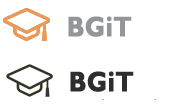
<style>
.page{position:relative;width:170px;height:110px;background:#ffffff}
.page>*{position:absolute;margin:0}
.t1{font:28.1px "GillSansMT-Bold";color:#939598;font-weight:bold;scale:0.89 1}
.t2{font:28.1px "GillSansMT-Bold";color:#2e2e2c;font-weight:bold;scale:0.89 1}
</style>
<div class="page">
<p class="t1" style="left:68px;top:16px;width:64px;height:21px">BGiT</p>
<p class="t2" style="left:70px;top:71px;width:64px;height:21px">BGiT</p>
</div>
